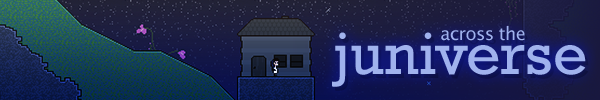
<style>
.page{position:relative;width:600px;height:100px}
.page>*{position:absolute;margin:0}
.t1{font:18px "LucidaSansUnicode";letter-spacing:-0.025em;color:#a0b2ed}
.t2{font:60px "Rockwell";color:#a0b2ed}
</style>
<div class="page">
<p class="t1" style="left:441px;top:26px;width:84px;height:15px">across the</p>
<p class="t2" style="left:332px;top:32px;width:254px;height:55px">juniverse</p>
</div>
